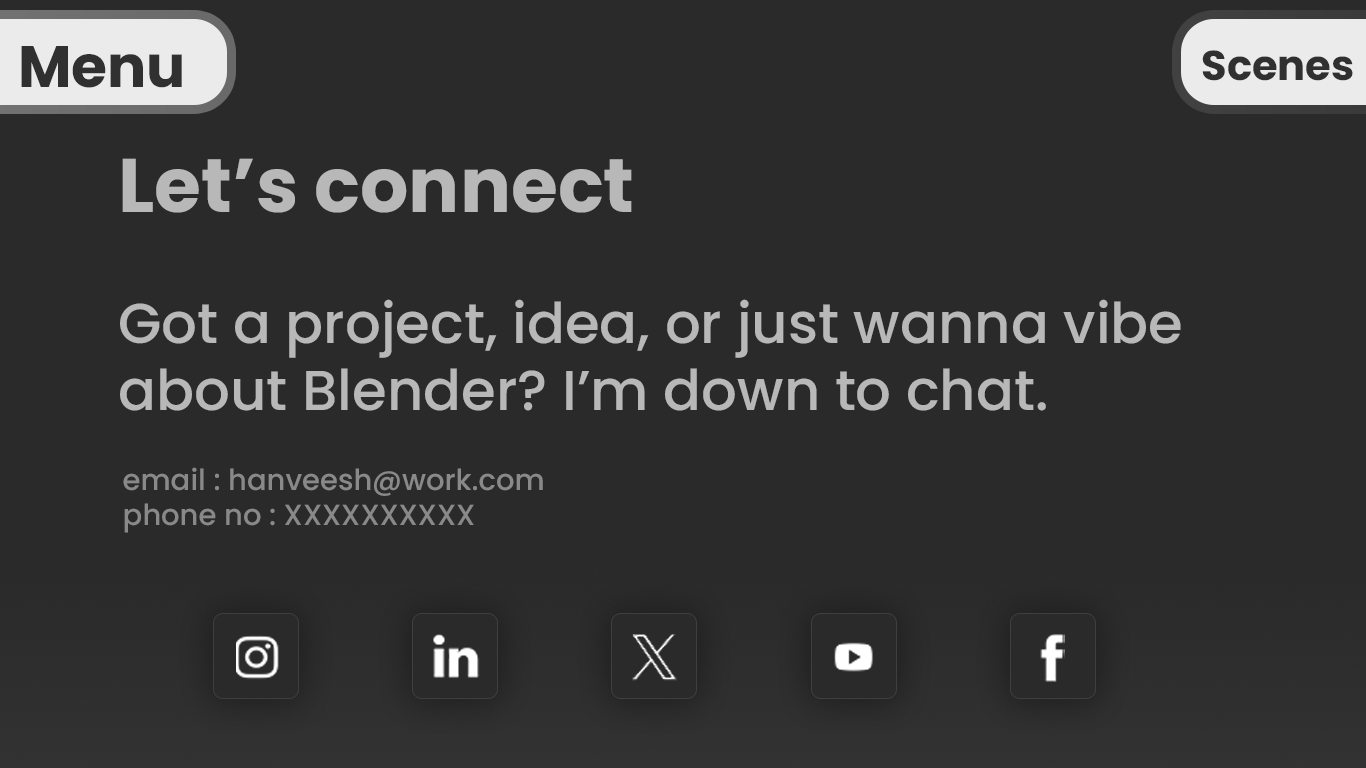
<style>
.page{position:relative;width:1366px;height:768px;background:#2a2a2a}
.page>*{position:absolute;margin:0}
.t1{font:58.3px "Poppins-Bold";color:#303030}
.t2{font:41.6px "Poppins-Bold";color:#303030}
.t3{font:75.9px "Poppins-Bold";color:#b8b8b8}
.t4{font:56.1px "Poppins-Medium";color:#b8b8b8}
.t5{font:29px "Poppins-Medium";color:#898989}
</style>
<div class="page">
<p class="t1" style="left:21px;top:46px;width:161px;height:42px">Menu</p>
<p class="t2" style="left:1202px;top:50px;width:151px;height:31px">Scenes</p>
<p class="t3" style="left:122px;top:158px;width:510px;height:55px">Let’s connect</p>
<p class="t4" style="left:120px;top:299px;width:1061px;height:112px">Got a project, idea, or just wanna vibe <br>about Blender? I’m down to chat.</p>
<p class="t5" style="left:123px;top:467px;width:420px;height:66px">email : hanveesh@work.com<br>phone no : XXXXXXXXXX</p>
</div>
